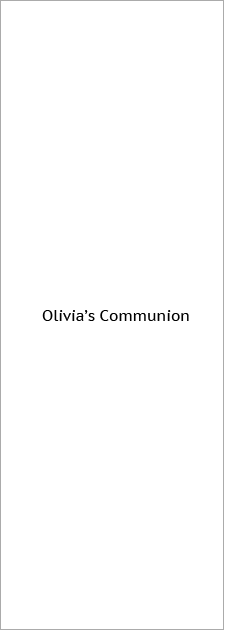
<style>
.page{position:relative;width:225px;height:630px;background:#ffffff}
.page>*{position:absolute;margin:0}
.t1{font:15px "PTSans-Caption";color:#000000}
</style>
<div class="page">
<p class="t1" style="left:42px;top:310px;width:147px;height:11px">Olivia’s Communion</p>
</div>
